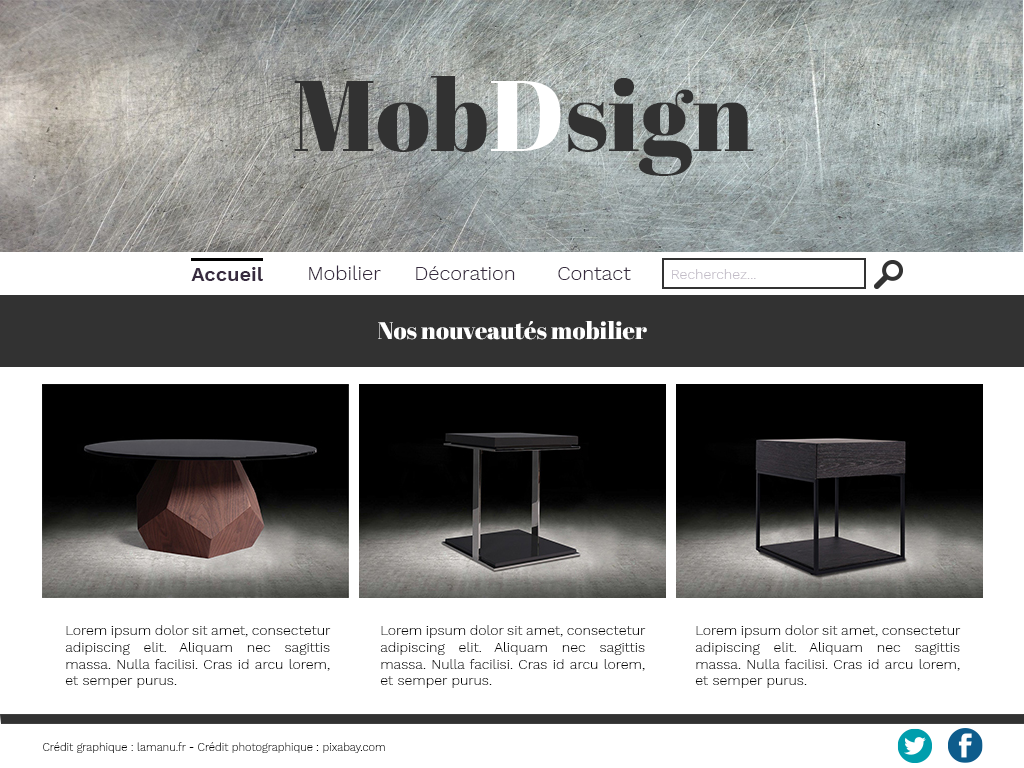
<style>
.page{position:relative;width:1024px;height:768px;background:#ffffff}
.page>*{position:absolute;margin:0}
.t1{font:100px "AbrilFatface-Regular";color:#323232}
.t2{font:100px "AbrilFatface-Regular";color:#ffffff}
.t3{font:20px "WorkSans-SemiBold";color:#372b3f}
.t4{font:20px "WorkSans-Light";color:#372b3f}
.t5{font:14px "WorkSans-Light";color:#c2bcc7}
.t6{font:24px "AbrilFatface-Regular";color:#ffffff}
.t7{font:14px "WorkSans-Light";color:#070707}
.t8{font:11px "WorkSans-Light";color:#000000}
</style>
<div class="page">
<p class="t1" style="left:294px;top:76px;width:460px;height:100px">Mob<span class="t2">D</span>sign</p>
<p class="t3" style="left:191px;top:267px;width:72px;height:14px">Accueil</p>
<p class="t4" style="left:309px;top:265px;width:72px;height:15px">Mobilier</p>
<p class="t4" style="left:416px;top:266px;width:99px;height:14px">Décoration</p>
<p class="t4" style="left:558px;top:267px;width:73px;height:13px">Contact</p>
<p class="t5" style="left:672px;top:269px;width:84px;height:10px">Recherchez...</p>
<p class="t6" style="left:378px;top:321px;width:269px;height:19px">Nos nouveautés mobilier</p>
<p class="t7" style="left:65px;top:625px;width:266px;height:63px;text-align:justify">Lorem ipsum dolor sit amet, consectetur adipiscing elit. Aliquam nec sagittis massa. Nulla facilisi. Cras id arcu lorem, et semper purus.</p>
<p class="t7" style="left:380px;top:625px;width:266px;height:63px;text-align:justify">Lorem ipsum dolor sit amet, consectetur adipiscing elit. Aliquam nec sagittis massa. Nulla facilisi. Cras id arcu lorem, et semper purus.</p>
<p class="t7" style="left:695px;top:625px;width:266px;height:63px;text-align:justify">Lorem ipsum dolor sit amet, consectetur adipiscing elit. Aliquam nec sagittis massa. Nulla facilisi. Cras id arcu lorem, et semper purus.</p>
<p class="t8" style="left:43px;top:742px;width:342px;height:11px">Crédit graphique : lamanu.fr - Crédit photographique : pixabay.com</p>
</div>
